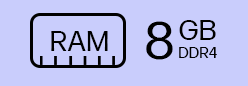
<style>
.page{position:relative;width:248px;height:86px;background:#c9cdfc}
.page>*{position:absolute;margin:0}
.t1{font:53.7px "FormaDJRMicro-Regular";color:#000000}
.t2{font:28.6px "FormaDJRMicro-Regular";color:#000000}
.t3{font:15.2px "FormaDJRMicro-Regular";color:#000000}
</style>
<div class="page">
<p class="t1" style="left:146px;top:21px;width:27px;height:39px">8</p>
<p class="t2" style="left:179px;top:20px;width:37px;height:20px">GB</p>
<p class="t2" style="left:51px;top:31px;width:57px;height:20px">RAM</p>
<p class="t3" style="left:179px;top:47px;width:38px;height:11px">DDR4</p>
</div>
